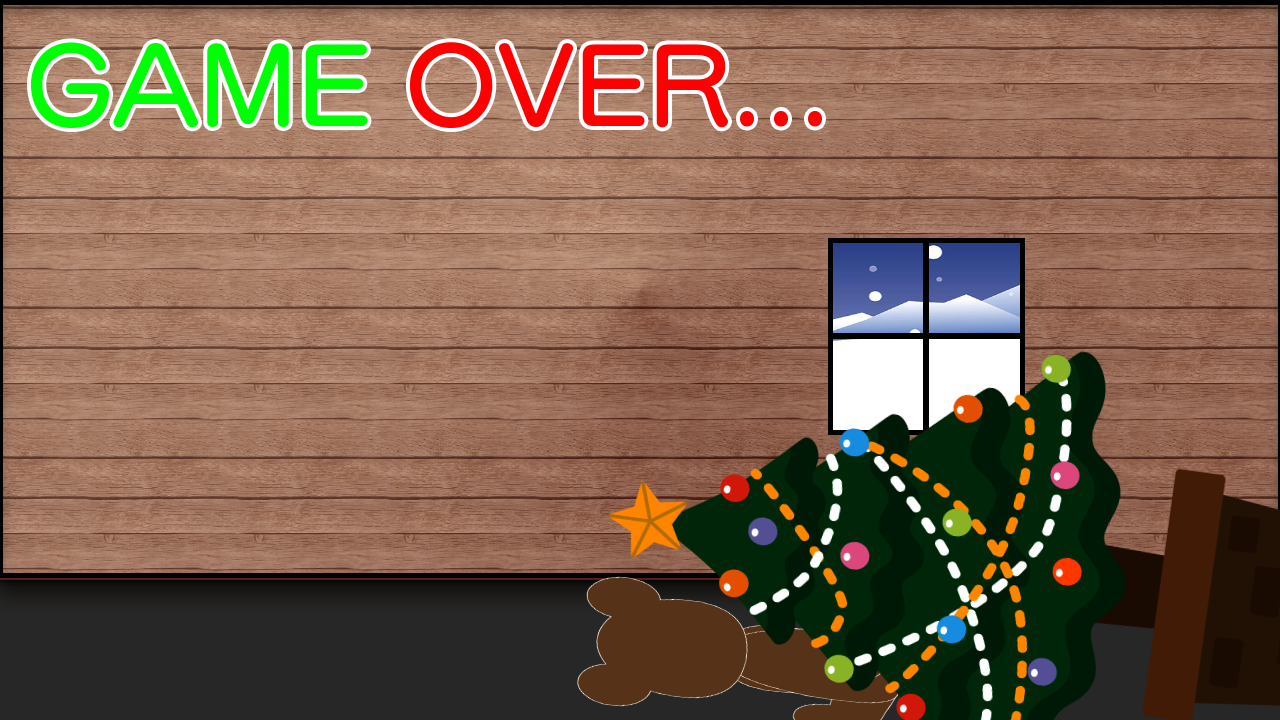
<style>
.page{position:relative;width:1280px;height:720px}
.page>*{position:absolute;margin:0}
.t1{font:104.2px "SeuratProN-DB";color:#ff0000}
.t2{font:104.2px "SeuratProN-DB";color:#00ff06}
</style>
<div class="page">
<p class="t1" style="left:31px;top:42px;width:792px;height:86px"><span class="t2">GAME </span>OVER...</p>
</div>
